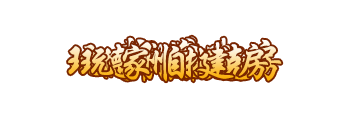
<style>
.page{position:relative;width:350px;height:120px;background:#ffffff}
.page>*{position:absolute;margin:0}
.t1{font:39.5px "STXingkai"}
</style>
<div class="page">
<p class="t1" style="left:81px;top:42px;width:188px;height:38px">玩家自建房</p>
</div>
